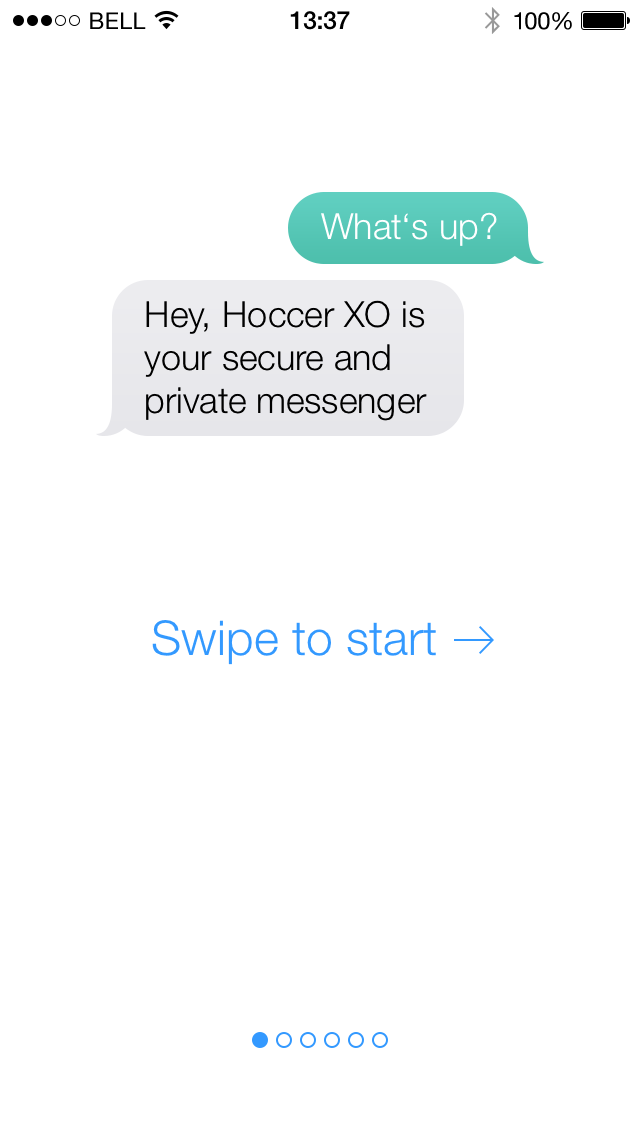
<style>
.page{position:relative;width:640px;height:1136px;background:#ffffff}
.page>*{position:absolute;margin:0}
.t1{font:36px "HelveticaNeue-Light";color:#ffffff}
.t2{font:36px "HelveticaNeue-Light";color:#000000}
.t3{font:48px "HelveticaNeue-Light";color:#3399ff}
</style>
<div class="page">
<p class="t1" style="left:321px;top:212px;width:176px;height:34px">What‘s up?</p>
<p class="t2" style="left:144px;top:300px;width:283px;height:121px">Hey, Hoccer XO is<br>your secure and<br>private messenger</p>
<p class="t3" style="left:152px;top:620px;width:284px;height:45px">Swipe to start</p>
</div>
